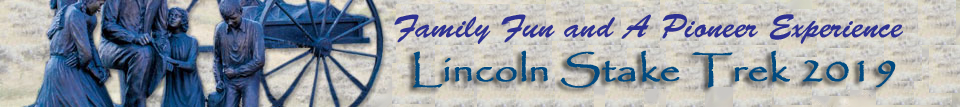
<style>
.page{position:relative;width:960px;height:107px}
.page>*{position:absolute;margin:0}
.t1{font:32.9px "BrushScriptStd";color:#2e3192}
.t2{font:36.8px "Papyrus-Regular";color:#004a80;font-weight:bold;scale:1.12 1}
</style>
<div class="page">
<p class="t1" style="left:394px;top:14px;width:510px;height:30px">Family Fun and A Pioneer Experience</p>
<p class="t2" style="left:413px;top:50px;width:483px;height:38px">Lincoln Stake Trek 2019</p>
</div>
